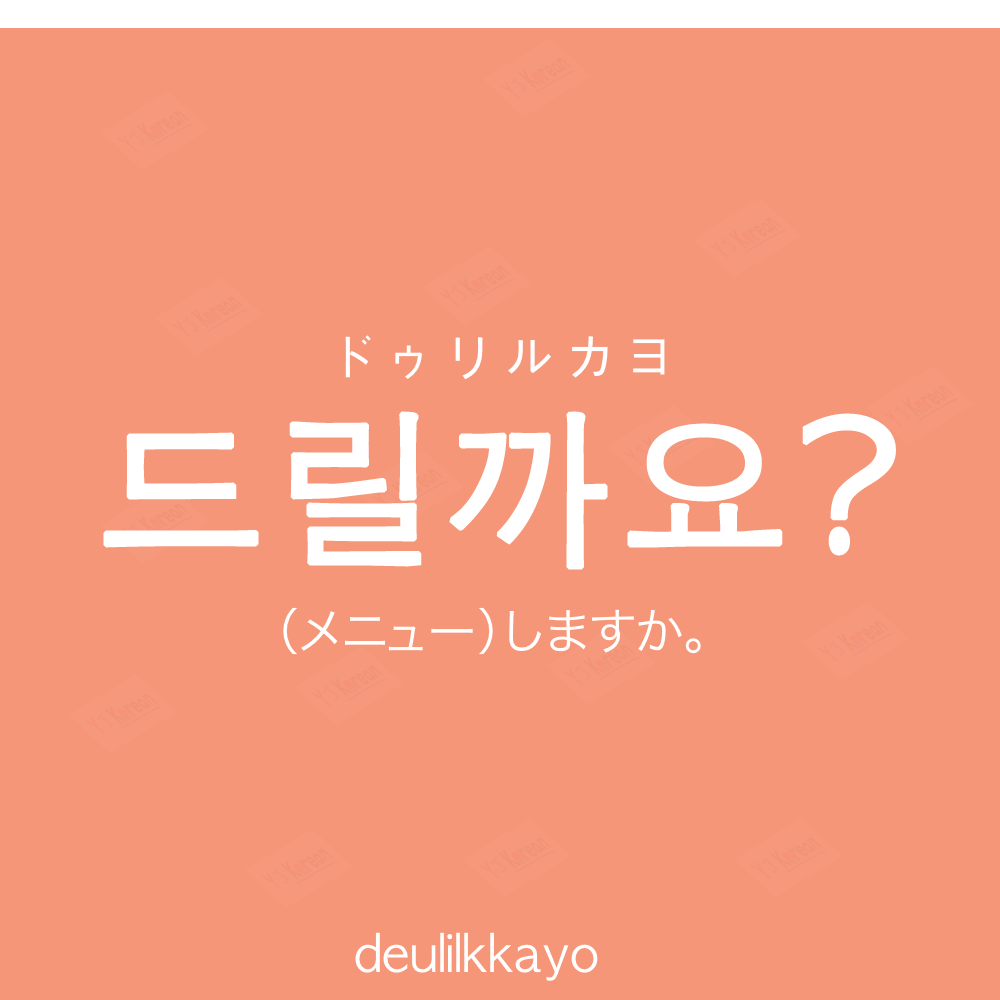
<style>
.page{position:relative;width:1000px;height:1000px;background:#f69679}
.page>*{position:absolute;margin:0}
.t1{font:60px "AppleGothic";color:#ffffff;text-transform:uppercase}
.t2{font:170px "AppleGothic";color:#ffffff;font-weight:bold}
.t3{font:50px "HiraKakuProN-W3";color:#ffffff}
.t4{font:50px "AppleGothic";color:#ffffff}
</style>
<div class="page">
<p class="t1" style="left:345px;top:335px;width:320px;height:45px">ドゥリルカヨ</p>
<p class="t2" style="left:103px;top:411px;width:793px;height:159px">드릴까요?</p>
<p class="t3" style="left:283px;top:607px;width:418px;height:48px">（メニュー）しますか。</p>
<p class="t4" style="left:355px;top:932px;width:243px;height:49px">deulilkkayo</p>
</div>
